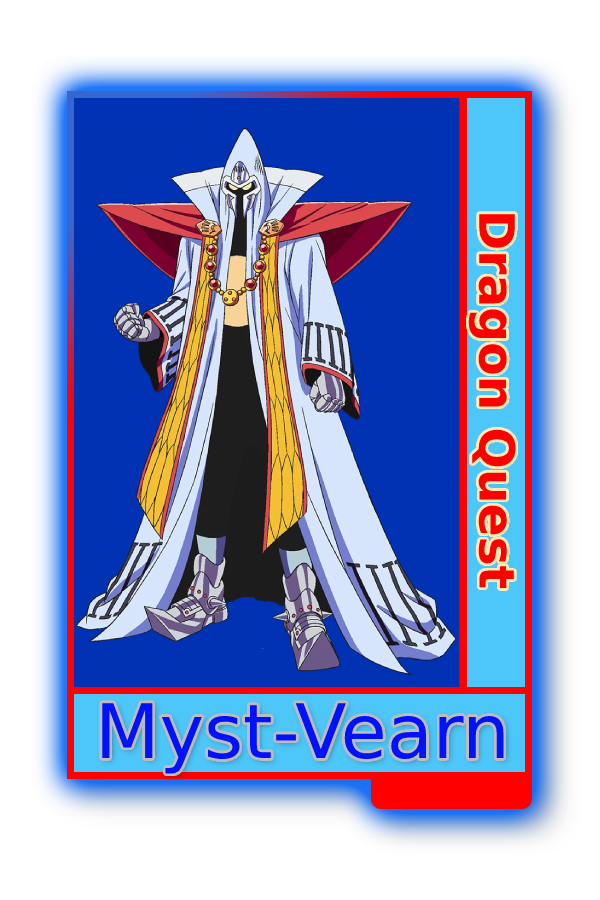
<style>
.page{position:relative;width:600px;height:900px;background:#0032b3}
.page>*{position:absolute;margin:0}
.t1{font:48.8px "MADETOMMY-Bold";color:#ff0000}
.t2{font:75px "CoolveticaRg-Regular";color:#0011fd}
</style>
<div class="page">
<p class="t1" style="left:468px;top:214px;width:48px;height:374px;rotate:90deg">Dragon Quest</p>
<p class="t2" style="left:102px;top:703px;width:402px;height:71px">Myst-Vearn</p>
</div>
